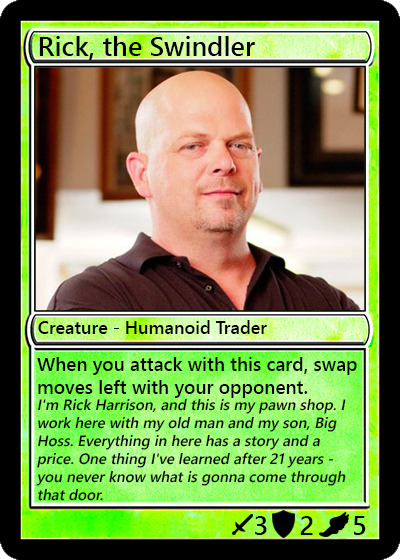
<style>
.page{position:relative;width:400px;height:560px}
.page>*{position:absolute;margin:0}
.t1{font:27px "YuGothicUI-Semibold";color:#000000}
.t2{font:18px "YuGothicUI-Semibold";color:#000000}
.t3{font:19px "YuGothicUI-Semibold";color:#000000}
.t4{font:15px "YuGothicUI-Semibold";color:#000000;font-style:italic}
</style>
<div class="page">
<p class="t1" style="left:39px;top:36px;width:216px;height:24px">Rick, the Swindler</p>
<p class="t2" style="left:38px;top:320px;width:229px;height:14px">Creature - Humanoid Trader</p>
<p class="t3" style="left:37px;top:357px;width:320px;height:41px">When you attack with this card, swap moves left with your opponent.</p>
<p class="t4" style="left:36px;top:398px;width:310px;height:103px">I'm Rick Harrison, and this is my pawn shop. I work here with my old man and my son, Big Hoss. Everything in here has a story and a price. One thing I've learned after 21 years - you never know what is gonna come through that door.</p>
<p class="t1" style="left:255px;top:516px;width:12px;height:19px">3</p>
<p class="t1" style="left:300px;top:516px;width:13px;height:19px">2</p>
<p class="t1" style="left:354px;top:516px;width:12px;height:19px">5</p>
</div>
